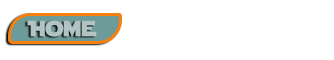
<style>
.page{position:relative;width:334px;height:60px;background:#ffffff}
.page>*{position:absolute;margin:0}
.t1{font:22px "StarJedi";color:#b1c3c2}
</style>
<div class="page">
<p class="t1" style="left:27px;top:20px;width:70px;height:17px">Home</p>
</div>
